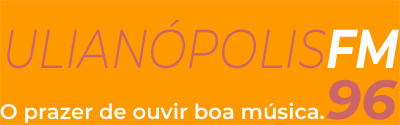
<style>
.page{position:relative;width:400px;height:125px;background:#ff9900}
.page>*{position:absolute;margin:0}
.t1{font:54.7px "Montserrat-LightItalic";color:#cc6666;scale:0.84 1}
.t2{font:54.7px "Montserrat-BoldItalic";color:#ffffff;scale:0.84 1}
.t3{font:55px "Montserrat-BoldItalic";color:#cc6666}
.t4{font:21px "Montserrat-SemiBold";color:#ffffff}
</style>
<div class="page">
<p class="t1" style="left:7px;top:20px;width:392px;height:49px">ULIANÓPOLIS<span class="t2">FM</span></p>
<p class="t3" style="left:326px;top:79px;width:72px;height:41px">96</p>
<p class="t4" style="left:0px;top:102px;width:324px;height:21px">O prazer de ouvir boa música.</p>
</div>
